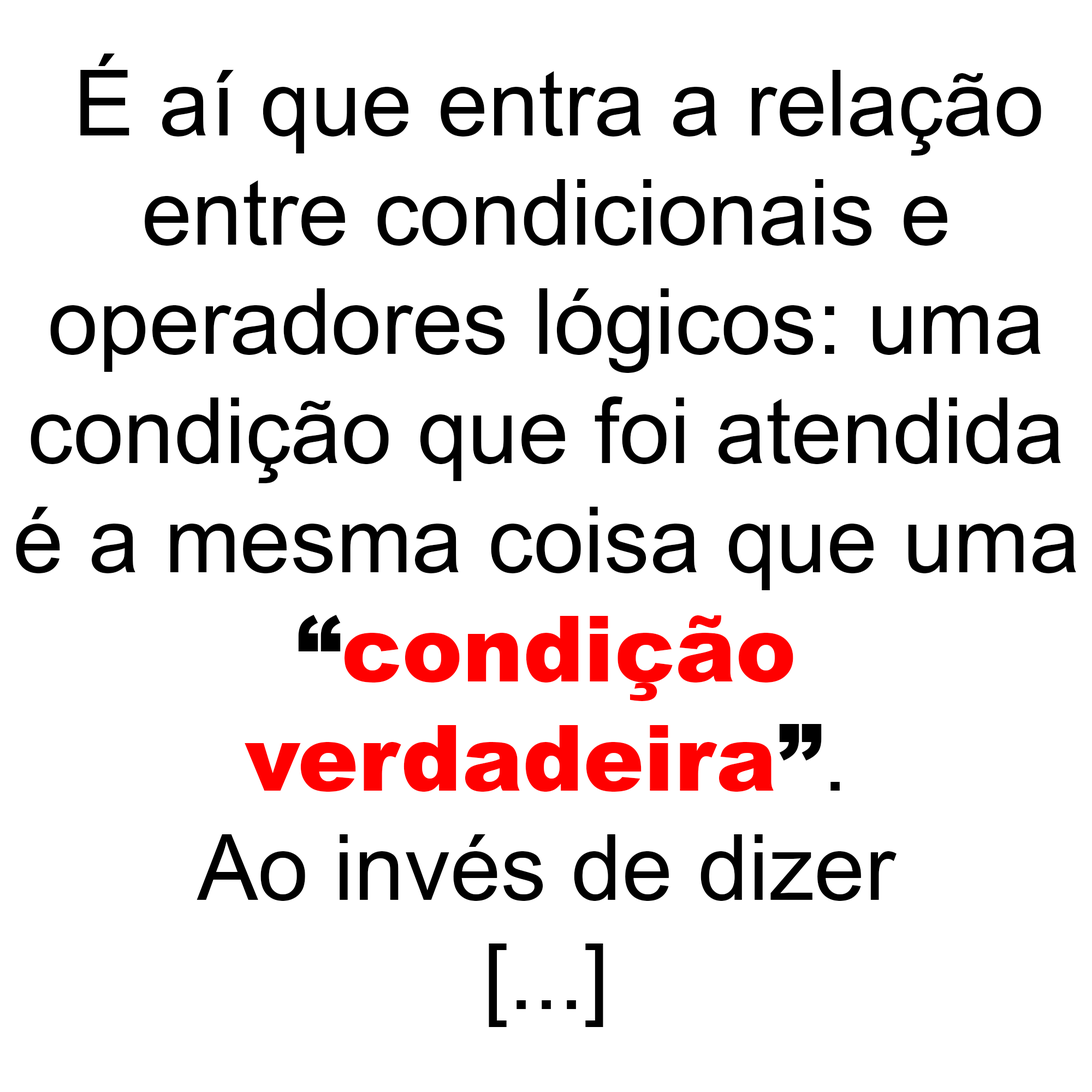
<style>
.page{position:relative;width:1092px;height:1092px;background:#ffffff}
.page>*{position:absolute;margin:0}
.t1{font:91px "ArialMT";color:#000000}
.t2{font:91px "Arial-Black";color:#000000}
.t3{font:91px "Arial-Black";color:#ff0000}
</style>
<div class="page">
<p class="t1" style="left:16px;top:54px;width:1060px;height:973px;text-align:center">É aí que entra a relação<br>entre condicionais e<br>operadores lógicos: uma<br>condição que foi atendida<br>é a mesma coisa que uma<br><span class="t2">“</span><span class="t3">condição<br>verdadeira</span><span class="t2">”</span>.<br>Ao invés de dizer<br>[...]</p>
</div>
